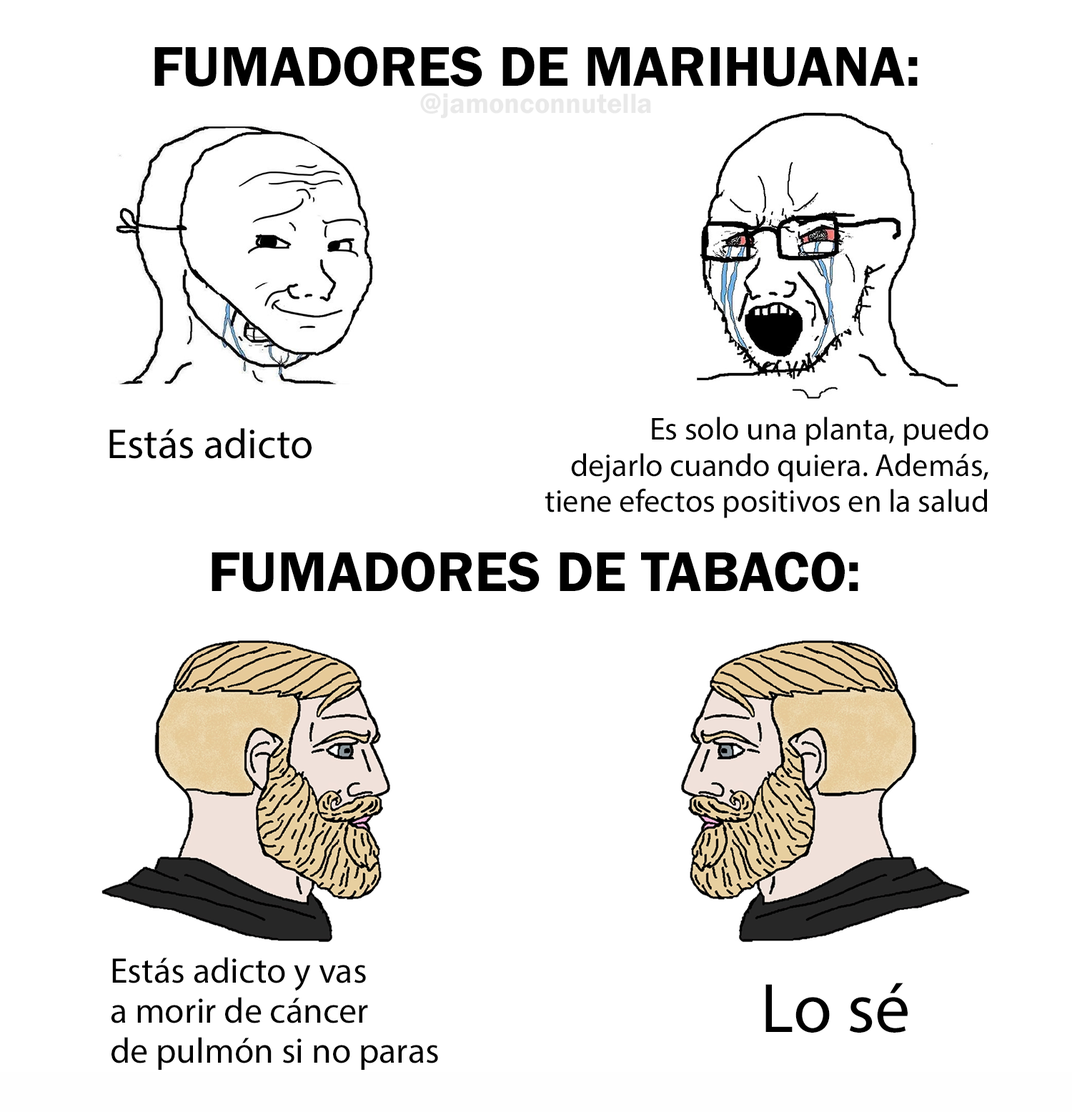
<style>
.page{position:relative;width:1072px;height:1112px;background:#ffffff}
.page>*{position:absolute;margin:0}
.t1{font:57.9px "FranklinGothic-Demi";color:#000000}
.t2{font:28.6px "FranklinGothic-Demi";color:#e9e9e9}
.t3{font:31.9px "MyriadPro-Regular";color:#000000}
.t4{font:42.1px "MyriadPro-Regular";color:#000000}
.t5{font:35.8px "MyriadPro-Regular";color:#000000}
.t6{font:70.7px "MyriadPro-Regular";color:#000000}
</style>
<div class="page">
<p class="t1" style="left:154px;top:46px;width:764px;height:40px">FUMADORES DE MARIHUANA:</p>
<p class="t2" style="left:420px;top:93px;width:231px;height:26px">@jamonconnutella</p>
<p class="t3" style="left:545px;top:417px;width:444px;height:101px;text-align:right">Es solo una planta, puedo<br>dejarlo cuando quiera. Además,<br>tiene efectos positivos en la salud</p>
<p class="t4" style="left:109px;top:428px;width:203px;height:31px">Estás adicto</p>
<p class="t1" style="left:212px;top:552px;width:646px;height:40px">FUMADORES DE TABACO:</p>
<p class="t5" style="left:111px;top:957px;width:327px;height:113px">Estás adicto y vas<br>a morir de cáncer<br>de pulmón si no paras</p>
<p class="t6" style="left:766px;top:983px;width:142px;height:50px">Lo sé</p>
</div>
